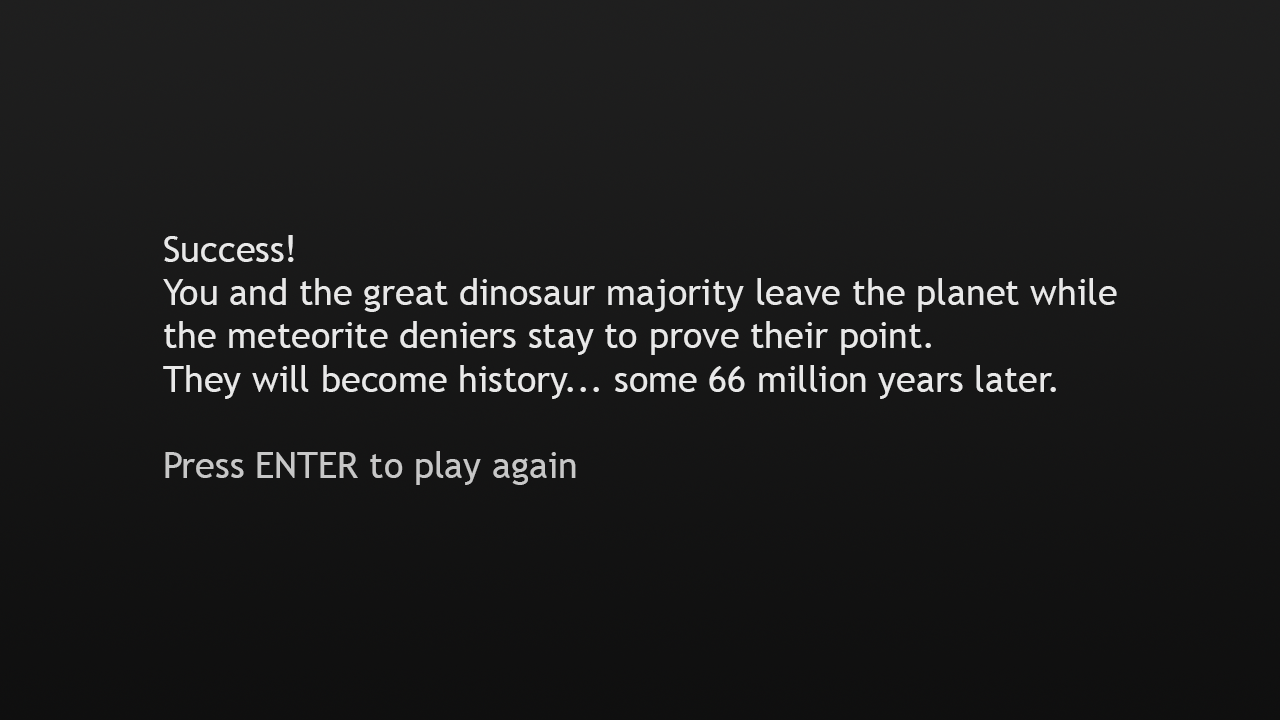
<style>
.page{position:relative;width:1280px;height:720px}
.page>*{position:absolute;margin:0}
.t1{font:36px "TrebuchetMS";color:#e8e8e8}
.t2{font:36px "TrebuchetMS";color:#c7c7c7}
</style>
<div class="page">
<p class="t1" style="left:163px;top:235px;width:954px;height:250px">Success!<br>You and the great dinosaur majority leave the planet while<br>the meteorite deniers stay to prove their point.<br>They will become history... some 66 million years later.<br><span class="t2"><br>Press ENTER to play again</span></p>
</div>
